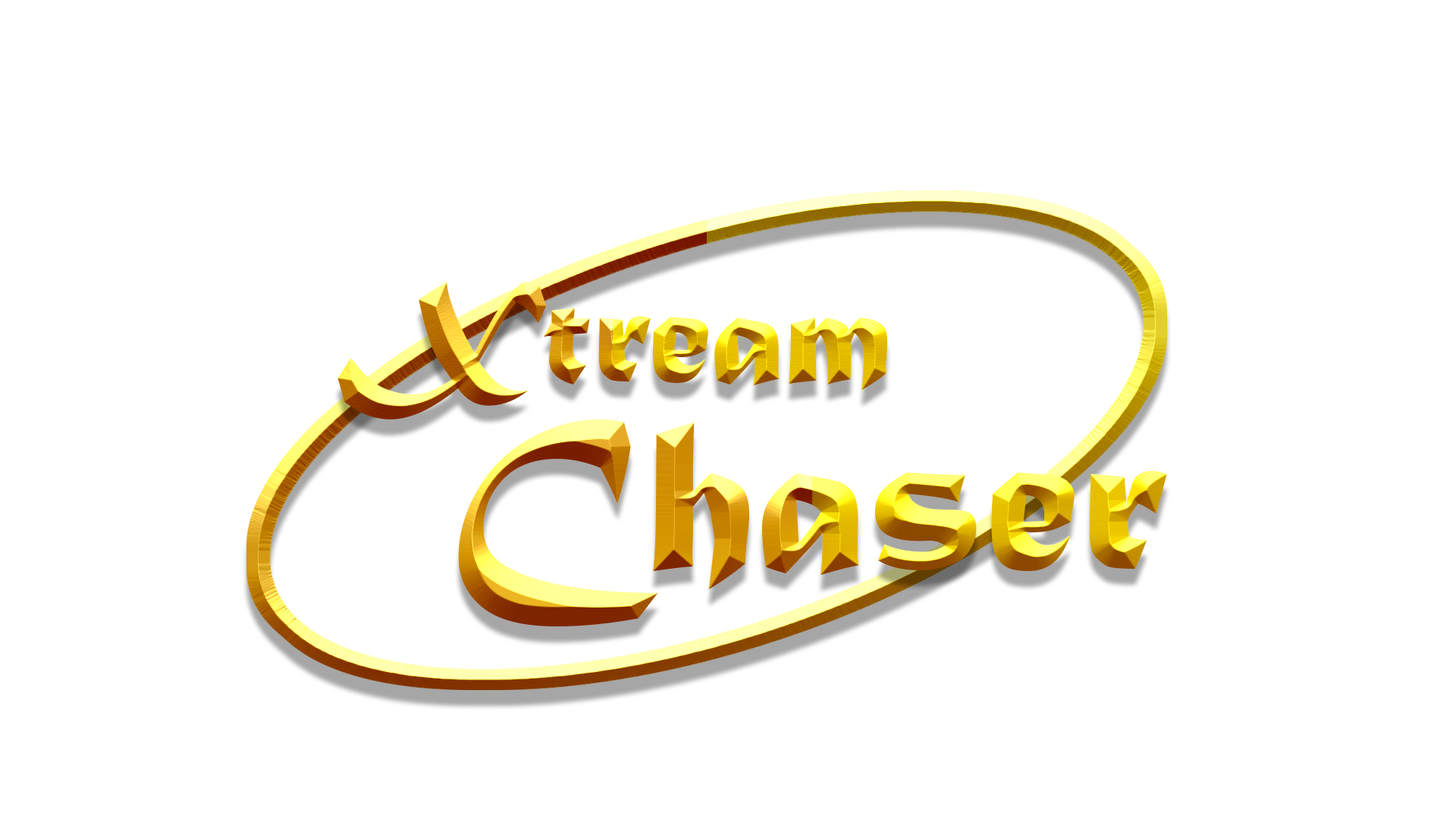
<style>
.page{position:relative;width:1456px;height:819px;background:#ffffff}
.page>*{position:absolute;margin:0}
.t1{font:151.7px "MaturaMTScriptCapitals"}
.t2{font:227.5px "MaturaMTScriptCapitals"}
</style>
<div class="page">
<p class="t1" style="left:337px;top:281px;width:551px;height:138px">Xtream</p>
<p class="t2" style="left:458px;top:419px;width:709px;height:207px">Chaser</p>
</div>
